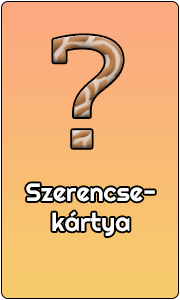
<style>
.page{position:relative;width:180px;height:300px}
.page>*{position:absolute;margin:0}
.t1{font:25px "Righteous-Regular";color:#ffffff}
</style>
<div class="page">
<p class="t1" style="left:26px;top:183px;width:129px;height:53px;text-align:center">Szerencse-<br>kártya</p>
</div>
